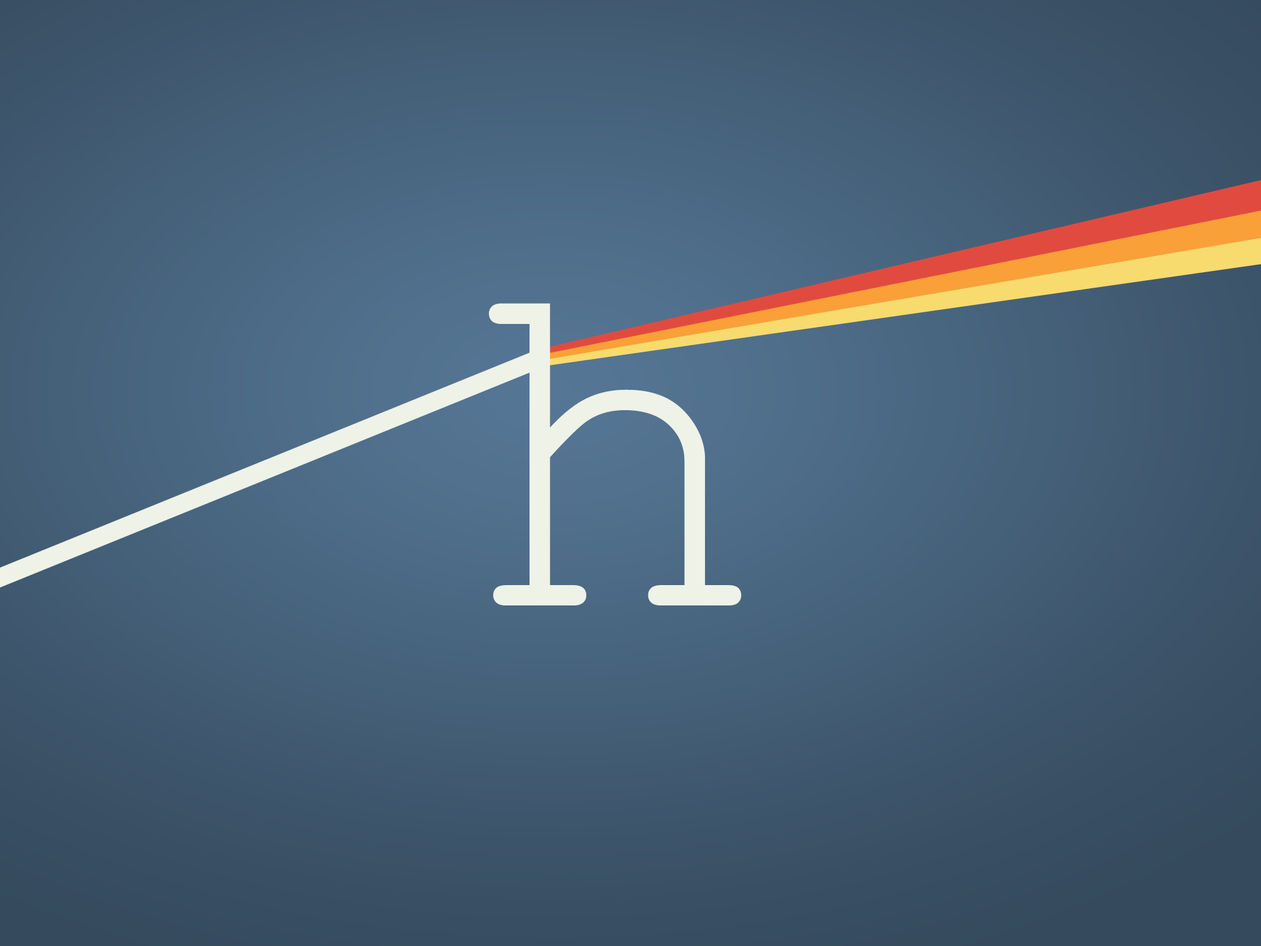
<style>
.page{position:relative;width:1261px;height:946px}
.page>*{position:absolute;margin:0}
.t1{font:492.5px "CourierNewPSMT";letter-spacing:0.003em;color:#eef2e7}
</style>
<div class="page">
<p class="t1" style="left:489px;top:303px;width:252px;height:302px">h</p>
</div>
